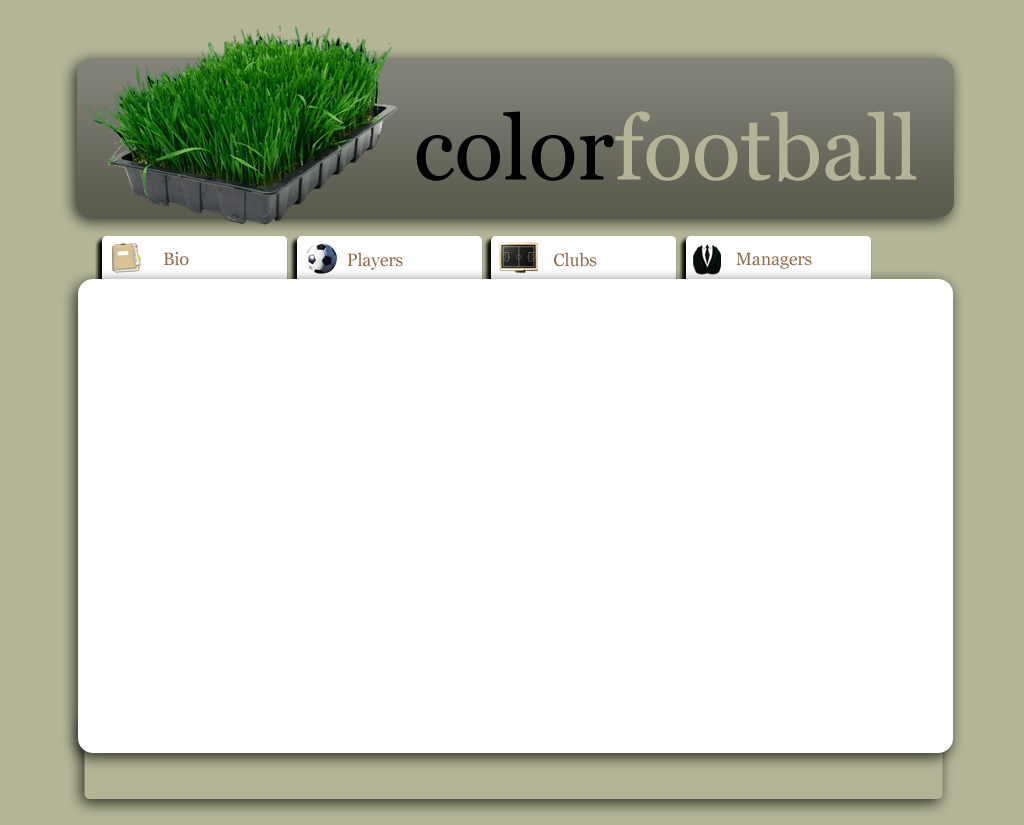
<style>
.page{position:relative;width:1024px;height:825px;background:#ffffff}
.page>*{position:absolute;margin:0}
.t1{font:17.5px "Georgia";color:#936942}
</style>
<div class="page">
<p class="t1" style="left:164px;top:252px;width:25px;height:14px">Bio</p>
<p class="t1" style="left:347px;top:252px;width:56px;height:18px">Players</p>
<p class="t1" style="left:554px;top:252px;width:43px;height:15px">Clubs</p>
<p class="t1" style="left:736px;top:252px;width:76px;height:17px">Managers</p>
</div>
